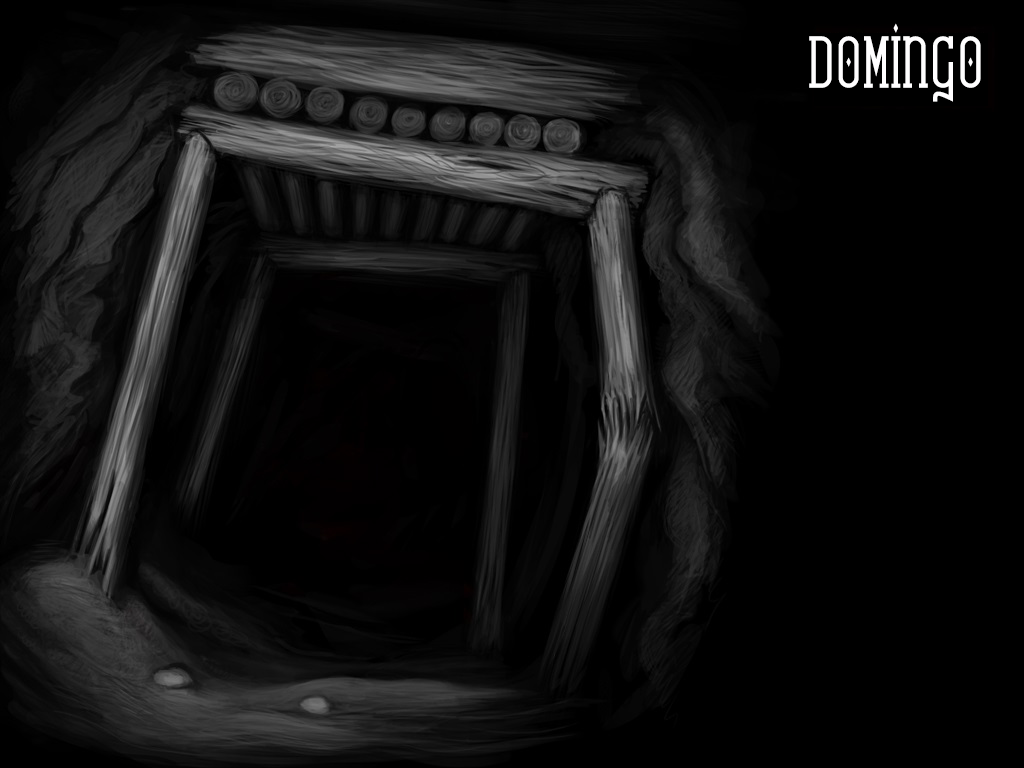
<style>
.page{position:relative;width:1024px;height:768px;background:#000000}
.page>*{position:absolute;margin:0}
.t1{font:78.7px "CatharsisRequiemBold";color:#fffeff}
</style>
<div class="page">
<p class="t1" style="left:809px;top:23px;width:172px;height:79px">domingo</p>
</div>
